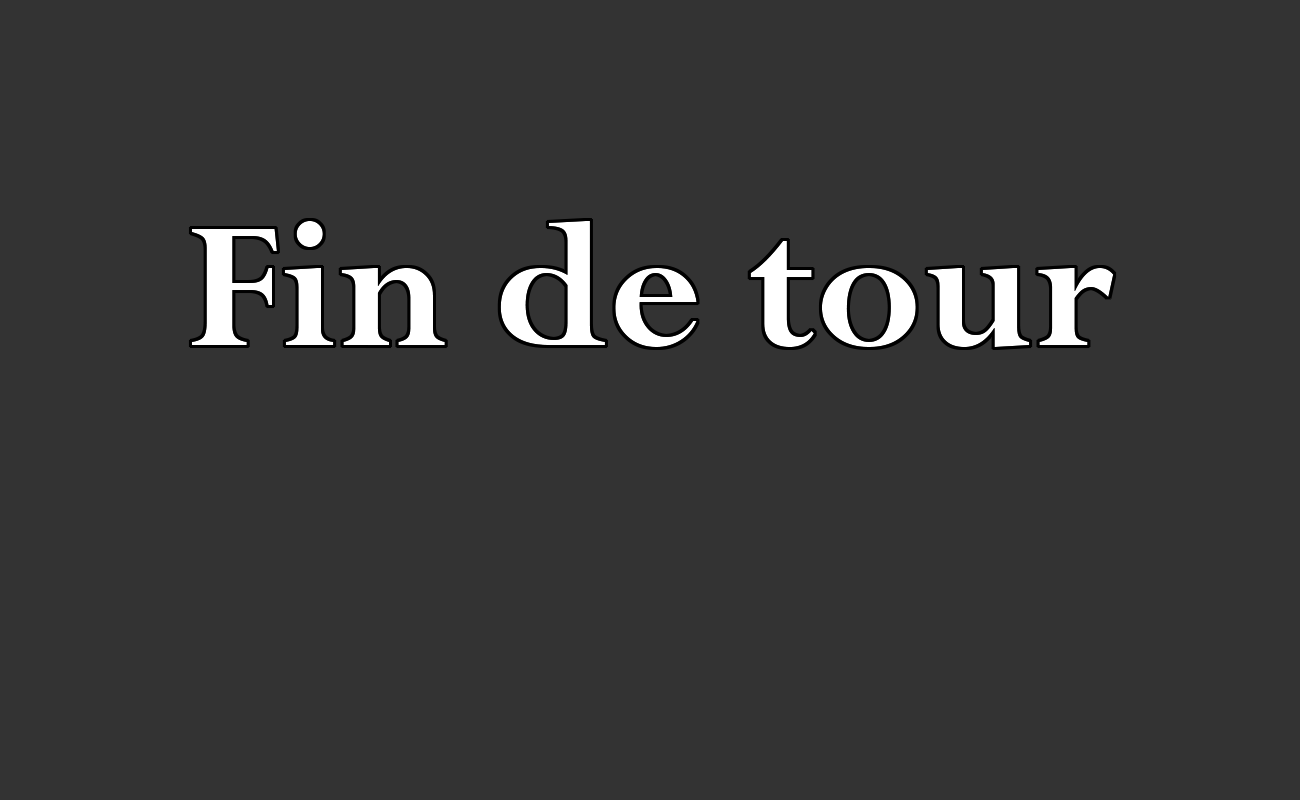
<style>
.page{position:relative;width:1300px;height:800px;background:#333333}
.page>*{position:absolute;margin:0}
.t1{font:199px "Perpetua-Bold";color:#ffffff}
</style>
<div class="page">
<p class="t1" style="left:191px;top:221px;width:923px;height:126px">Fin de tour</p>
</div>
